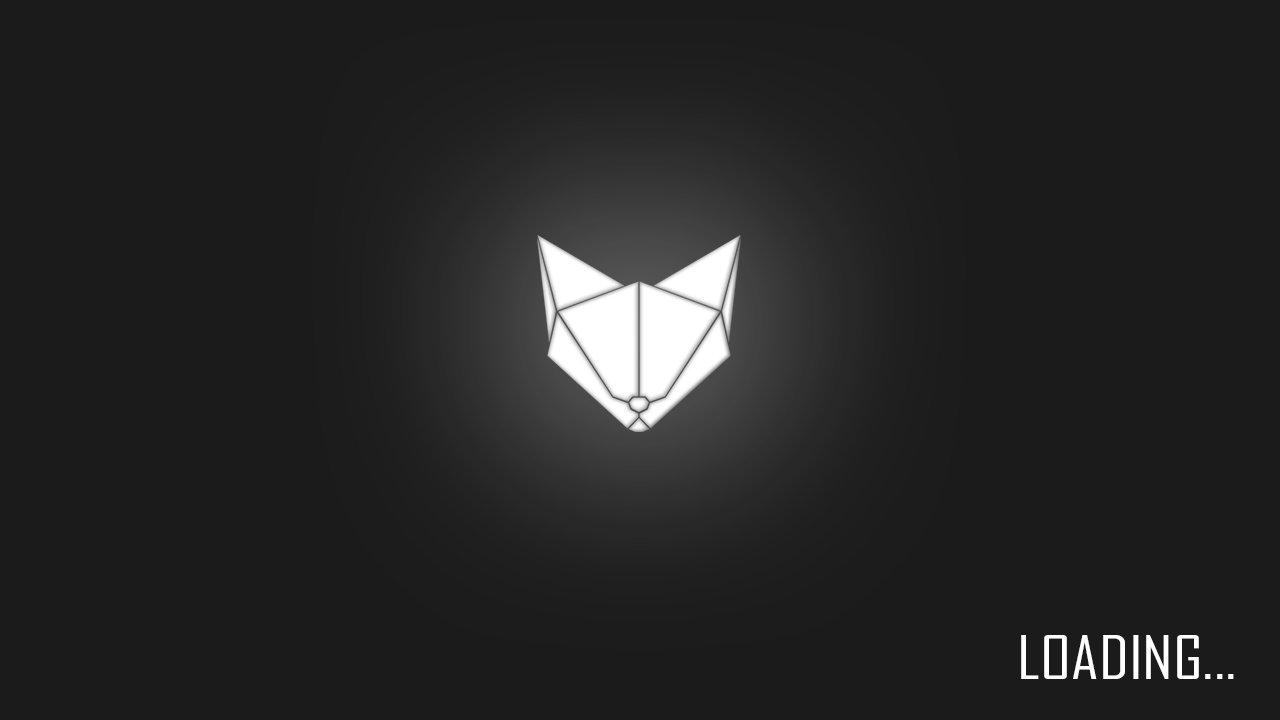
<style>
.page{position:relative;width:1280px;height:720px;background:#1b1b1b}
.page>*{position:absolute;margin:0}
.t1{font:57.6px "AgencyFB-Reg";color:#ffffff;text-transform:uppercase;scale:1.2 1}
</style>
<div class="page">
<p class="t1" style="left:1021px;top:635px;width:213px;height:44px">Loading...</p>
</div>
